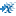
<style>
.page{position:relative;width:16px;height:16px;background:#ffffff}
.page>*{position:absolute;margin:0}
.t1{font:14px "Georgia-Italic";color:#005999}
.t2{font:14px "Georgia-Italic";color:#5892bf}
</style>
<div class="page">
<p class="t1" style="left:4px;top:6px;width:9px;height:7px">x</p>
<p class="t2" style="left:6px;top:4px;width:9px;height:7px">x</p>
</div>
